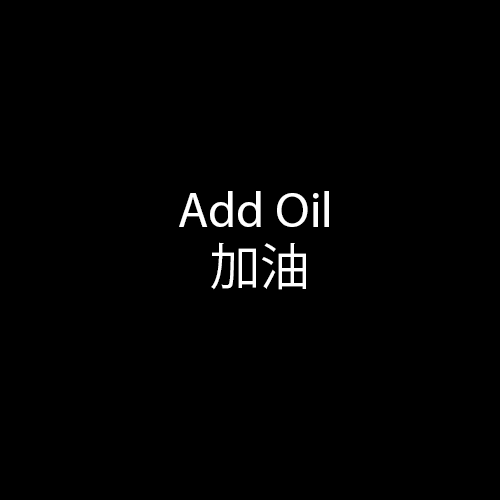
<style>
.page{position:relative;width:500px;height:500px;background:#000000}
.page>*{position:absolute;margin:0}
.t1{font:50px "MyriadPro-Regular";color:#ffffff}
.t2{font:50px "KozGoPr6N-Regular";color:#ffffff}
</style>
<div class="page">
<p class="t1" style="left:179px;top:191px;width:150px;height:36px">Add Oil</p>
<p class="t2" style="left:211px;top:242px;width:95px;height:48px">加油</p>
</div>
